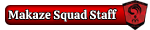
<style>
.page{position:relative;width:150px;height:30px;background:#ffffff}
.page>*{position:absolute;margin:0}
.t1{font:12px "Calistoga-Regular";color:#ffffff}
</style>
<div class="page">
<p class="t1" style="left:8px;top:9px;width:109px;height:13px">Makaze Squad Staff</p>
</div>
